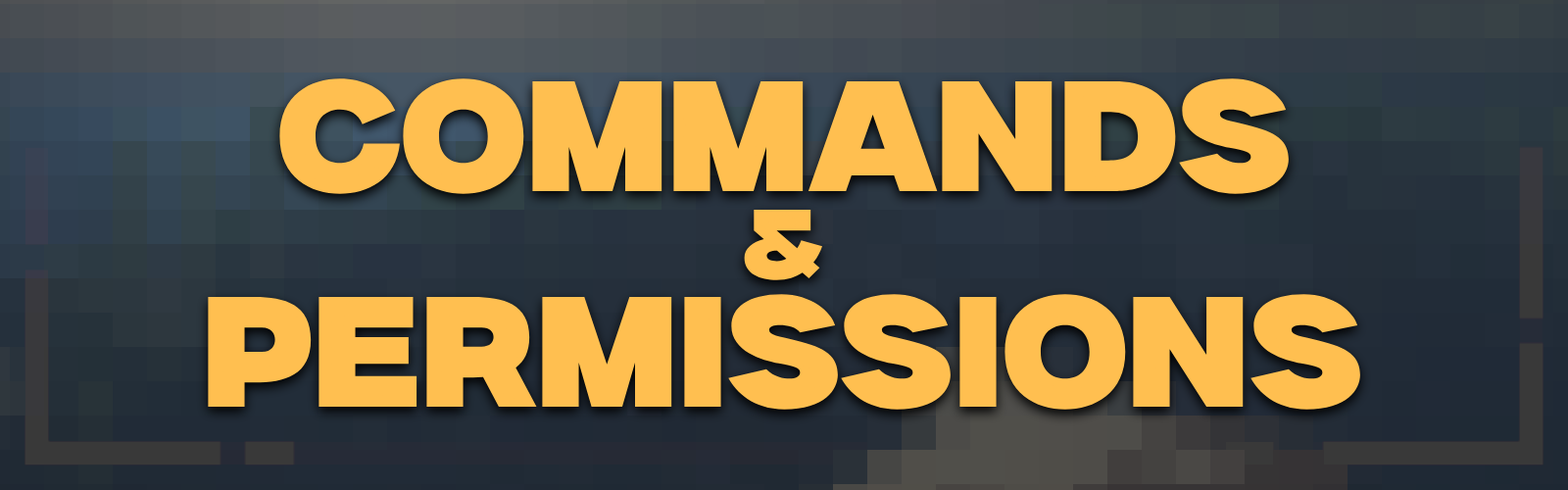
<style>
.page{position:relative;width:1568px;height:490px}
.page>*{position:absolute;margin:0}
.t1{font:156.8px "MilkerRegular";color:#ffbf50}
.t2{font:98px "MilkerRegular";color:#ffbf50}
</style>
<div class="page">
<p class="t1" style="left:279px;top:78px;width:1010px;height:116px">COMMANDS</p>
<p class="t2" style="left:744px;top:209px;width:79px;height:71px">&amp;</p>
<p class="t1" style="left:208px;top:294px;width:1152px;height:116px">PERMISSIONS</p>
</div>
